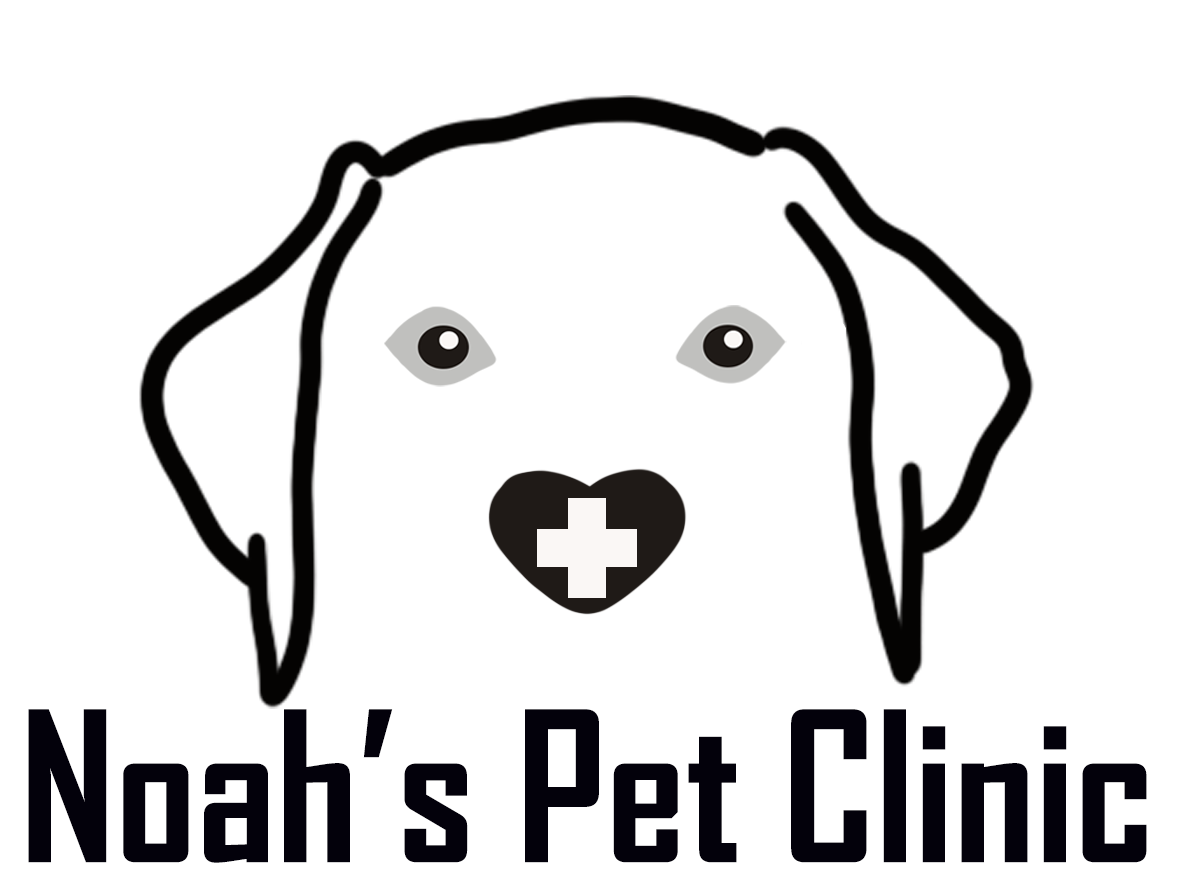
<style>
.page{position:relative;width:1186px;height:889px;background:#ffffff}
.page>*{position:absolute;margin:0}
.t1{font:200px "AgencyFB-Bold";color:#03010b}
</style>
<div class="page">
<p class="t1" style="left:28px;top:709px;width:1119px;height:154px">Noah’s Pet Clinic</p>
</div>
